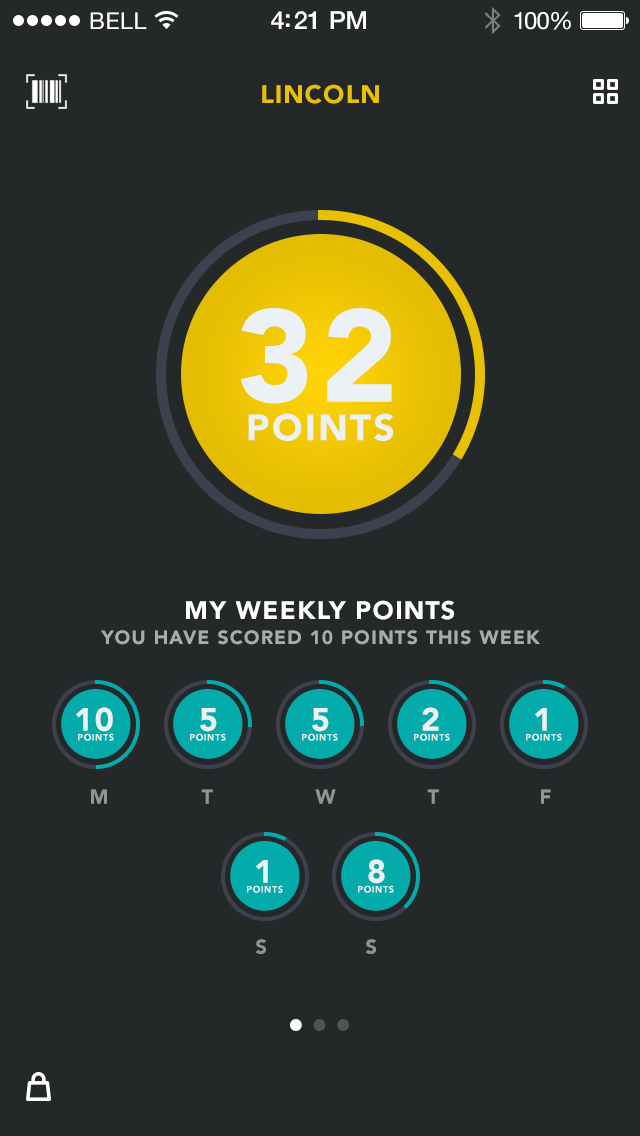
<style>
.page{position:relative;width:640px;height:1136px;background:#252829}
.page>*{position:absolute;margin:0}
.t1{font:23px "HelveticaNeue";letter-spacing:0.02em;color:#ffffff}
.t2{font:25px "HelveticaNeue-Medium";letter-spacing:-0.02em;color:#ffffff}
.t3{font:24px "HelveticaNeue";letter-spacing:-0.02em;color:#ffffff}
.t4{font:25px "Avenir-Black";letter-spacing:0.06em;color:#e8c103}
.t5{font:129.7px "Avenir-Black";letter-spacing:0.06em;color:#ebf1f5}
.t6{font:36.6px "Avenir-Black";letter-spacing:0.06em;color:#ebf1f5}
.t7{font:25px "Avenir-Black";letter-spacing:0.06em;color:#ffffff}
.t8{font:19px "Avenir-Black";letter-spacing:0.06em;color:#aaabab}
.t9{font:32.3px "Avenir-Black";letter-spacing:0.06em;color:#ebf1f5}
.t10{font:9.1px "Avenir-Black";letter-spacing:0.06em;color:#ebf1f5}
.t11{font:20px "Avenir-Black";letter-spacing:0.06em;color:#929494}
</style>
<div class="page">
<p class="t1" style="left:90px;top:12px;width:57px;height:17px">BELL</p>
<p class="t2" style="left:271px;top:11px;width:95px;height:18px">4:21 PM</p>
<p class="t3" style="left:514px;top:11px;width:57px;height:19px">100%</p>
<p class="t4" style="left:262px;top:84px;width:117px;height:20px">LINCOLN</p>
<p class="t5" style="left:241px;top:308px;width:151px;height:96px">32</p>
<p class="t6" style="left:248px;top:413px;width:145px;height:28px">POINTS</p>
<p class="t7" style="left:186px;top:600px;width:268px;height:20px">MY WEEKLY POINTS</p>
<p class="t8" style="left:101px;top:630px;width:439px;height:15px">YOU HAVE SCORED 10 POINTS THIS WEEK</p>
<p class="t9" style="left:76px;top:707px;width:37px;height:25px">10</p>
<p class="t9" style="left:200px;top:708px;width:17px;height:24px">5</p>
<p class="t9" style="left:312px;top:708px;width:17px;height:24px">5</p>
<p class="t9" style="left:422px;top:707px;width:17px;height:24px">2</p>
<p class="t9" style="left:535px;top:708px;width:12px;height:23px">1</p>
<p class="t10" style="left:78px;top:733px;width:36px;height:8px">POINTS</p>
<p class="t10" style="left:190px;top:733px;width:36px;height:8px">POINTS</p>
<p class="t10" style="left:302px;top:733px;width:36px;height:8px">POINTS</p>
<p class="t10" style="left:414px;top:733px;width:36px;height:8px">POINTS</p>
<p class="t10" style="left:526px;top:733px;width:36px;height:8px">POINTS</p>
<p class="t11" style="left:91px;top:789px;width:16px;height:15px">M</p>
<p class="t11" style="left:201px;top:789px;width:12px;height:15px">T</p>
<p class="t11" style="left:315px;top:789px;width:21px;height:15px">W</p>
<p class="t11" style="left:427px;top:789px;width:12px;height:15px">T</p>
<p class="t11" style="left:541px;top:789px;width:10px;height:15px">F</p>
<p class="t9" style="left:256px;top:860px;width:12px;height:23px">1</p>
<p class="t9" style="left:368px;top:859px;width:17px;height:25px">8</p>
<p class="t10" style="left:247px;top:885px;width:36px;height:8px">POINTS</p>
<p class="t10" style="left:358px;top:885px;width:36px;height:8px">POINTS</p>
<p class="t11" style="left:256px;top:939px;width:10px;height:15px">S</p>
<p class="t11" style="left:366px;top:939px;width:10px;height:15px">S</p>
</div>
